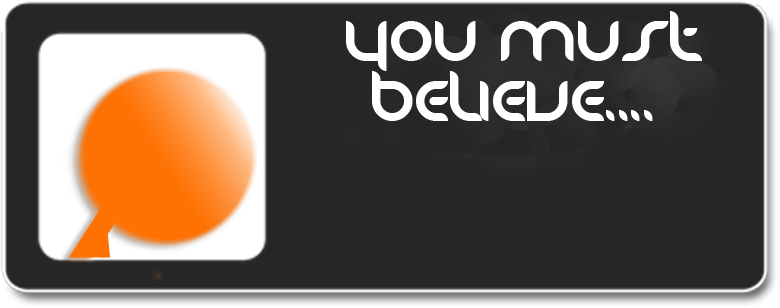
<style>
.page{position:relative;width:780px;height:308px;background:#262626}
.page>*{position:absolute;margin:0}
.t1{font:50px "Danube";color:#ffffff}
</style>
<div class="page">
<p class="t1" style="left:346px;top:11px;width:356px;height:110px;text-align:center">you must believe....</p>
</div>
